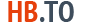
<style>
.page{position:relative;width:110px;height:23px;background:#ffffff}
.page>*{position:absolute;margin:0}
.t1{font:30px "PTSans-NarrowBold";letter-spacing:0.02em;color:#3e4d5c}
.t2{font:30px "PTSans-NarrowBold";letter-spacing:0.02em;color:#e6400c}
</style>
<div class="page">
<p class="t1" style="left:8px;top:1px;width:66px;height:21px"><span class="t2">HB</span>.TO</p>
</div>
